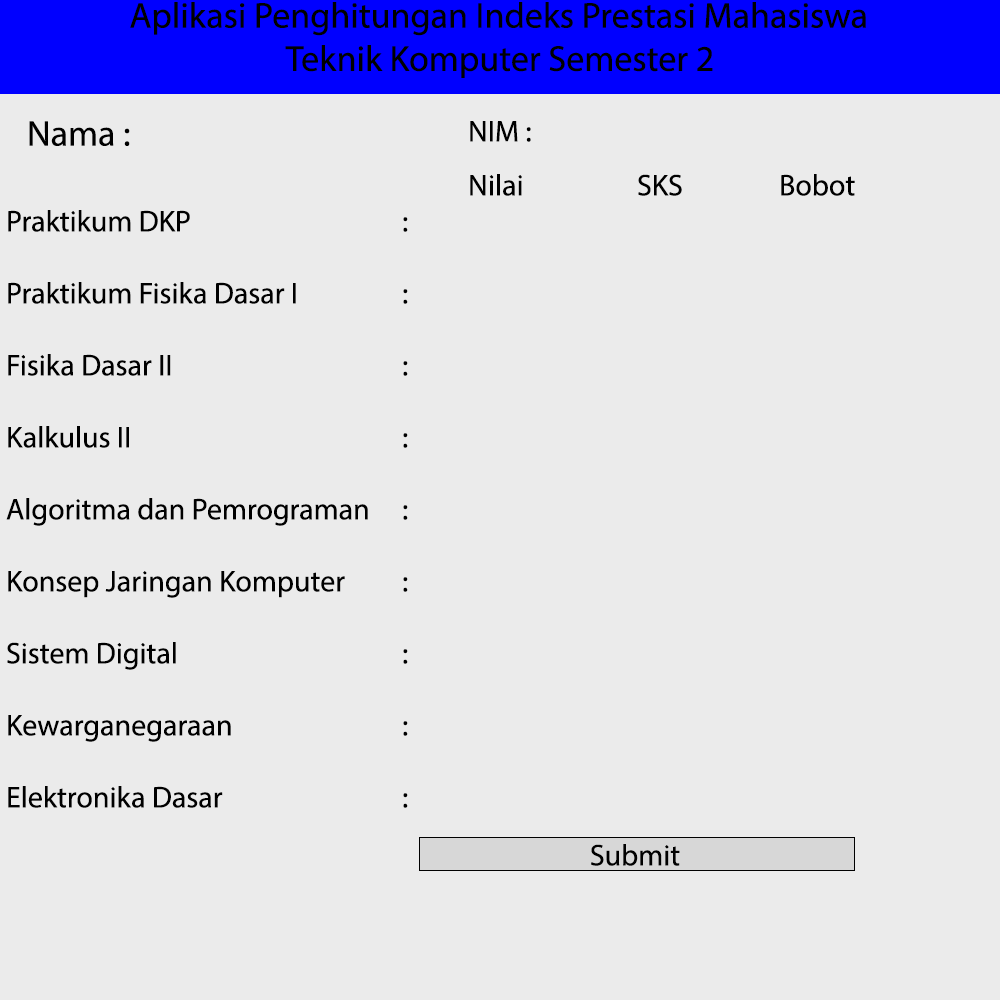
<style>
.page{position:relative;width:1000px;height:1000px;background:#ebebeb}
.page>*{position:absolute;margin:0}
.t1{font:36px "MyriadPro-Regular";color:#000000}
.t2{font:30px "MyriadPro-Regular";color:#000000}
</style>
<div class="page">
<p class="t1" style="left:130px;top:2px;width:736px;height:76px;text-align:center">Aplikasi Penghitungan Indeks Prestasi Mahasiswa Teknik Komputer Semester 2</p>
<p class="t1" style="left:29px;top:121px;width:101px;height:25px">Nama :</p>
<p class="t2" style="left:470px;top:121px;width:61px;height:21px">NIM :</p>
<p class="t2" style="left:470px;top:174px;width:52px;height:22px">Nilai</p>
<p class="t2" style="left:638px;top:174px;width:44px;height:22px">SKS</p>
<p class="t2" style="left:781px;top:174px;width:74px;height:22px">Bobot</p>
<p class="t2" style="left:6px;top:210px;width:402px;height:598px">Praktikum DKP      :<br><br>Praktikum Fisika Dasar I   :<br><br>Fisika Dasar II       :<br><br>Kalkulus II        :<br><br>Algoritma dan Pemrograman :<br><br>Konsep Jaringan Komputer  :<br><br>Sistem Digital       :<br><br>Kewarganegaraan     :<br><br>Elektronika Dasar     :</p>
<p class="t2" style="left:591px;top:844px;width:89px;height:22px">Submit</p>
</div>
